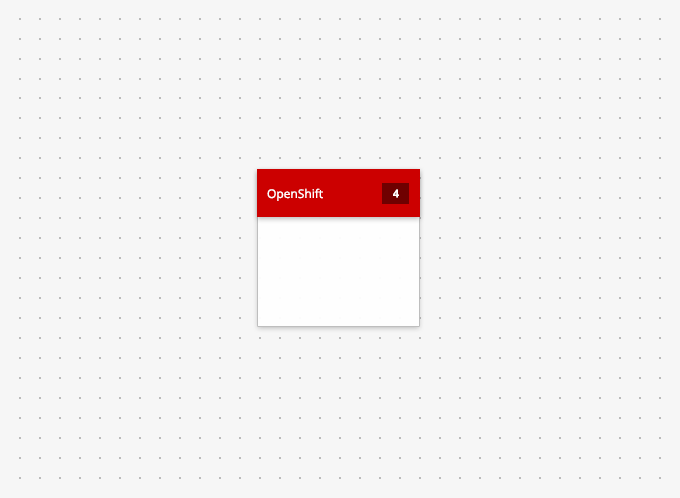
<style>
.page{position:relative;width:680px;height:498px;background:#f6f6f6}
.page>*{position:absolute;margin:0}
.t1{font:12px "OpenSans";color:#ffffff}
.t2{font:11px "OpenSans-Bold";letter-spacing:-0.01em;color:#fffefe}
</style>
<div class="page">
<p class="t1" style="left:267px;top:188px;width:56px;height:13px">OpenShift</p>
<p class="t2" style="left:393px;top:189px;width:6px;height:9px">4</p>
</div>
